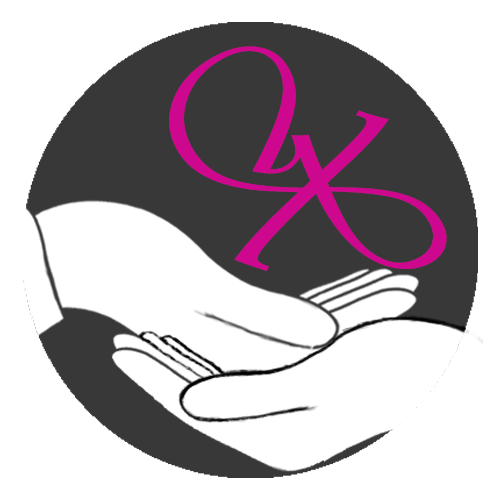
<style>
.page{position:relative;width:500px;height:500px;background:#ffffff}
.page>*{position:absolute;margin:0}
.t1{font:288px "Vivaldii";color:#cd078e;scale:0.78 1}
</style>
<div class="page">
<p class="t1" style="left:169px;top:46px;width:278px;height:225px;rotate:62deg">X</p>
</div>
